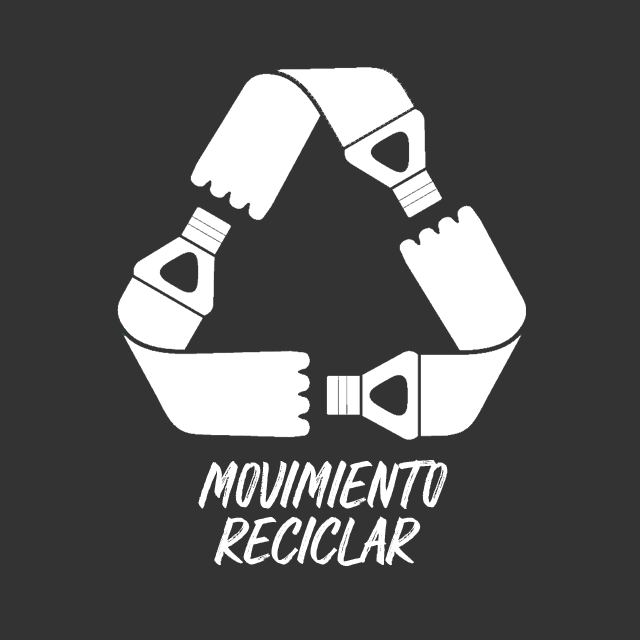
<style>
.page{position:relative;width:640px;height:640px;background:#333333}
.page>*{position:absolute;margin:0}
.t1{font:60px/56px "RawkBrush";color:#ffffff}
.t2{font:60px "MyriadPro-Regular";color:#000000}
</style>
<div class="page">
<p class="t1" style="left:198px;top:459px;width:250px;height:107px;text-align:center"><span class="t2"> </span>Movimiento <br>Reciclar</p>
</div>
